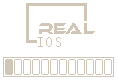
<style>
.page{position:relative;width:118px;height:80px;background:#ffffff}
.page>*{position:absolute;margin:0}
.t1{font:15.1px "EthnocentricRg-Regular";color:#cfc6b8}
.t2{font:15.1px "AndaleMono";color:#cfc6b8}
</style>
<div class="page">
<p class="t1" style="left:39px;top:23px;width:56px;height:11px">REAL</p>
<p class="t2" style="left:38px;top:37px;width:23px;height:10px">IOS</p>
</div>
